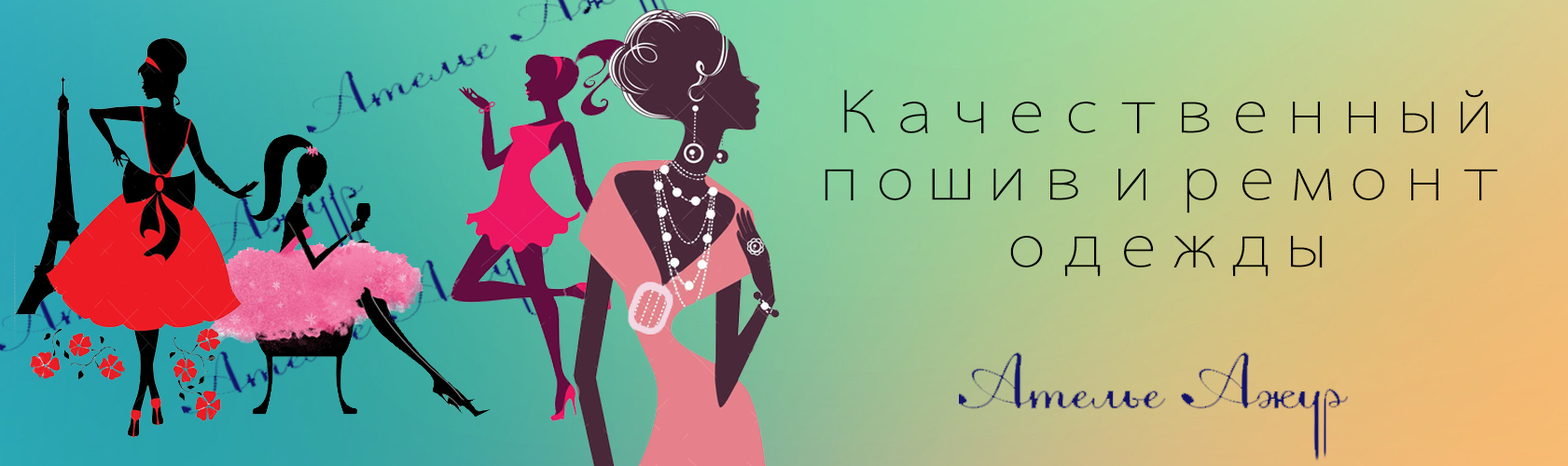
<style>
.page{position:relative;width:1568px;height:466px}
.page>*{position:absolute;margin:0}
.t1{font:56px "KozGoPro-ExtraLight";color:#000000}
</style>
<div class="page">
<p class="t1" style="left:825px;top:90px;width:673px;height:187px;text-align:center">Качественный<br>пошив и ремонт <br>одежды</p>
</div>
